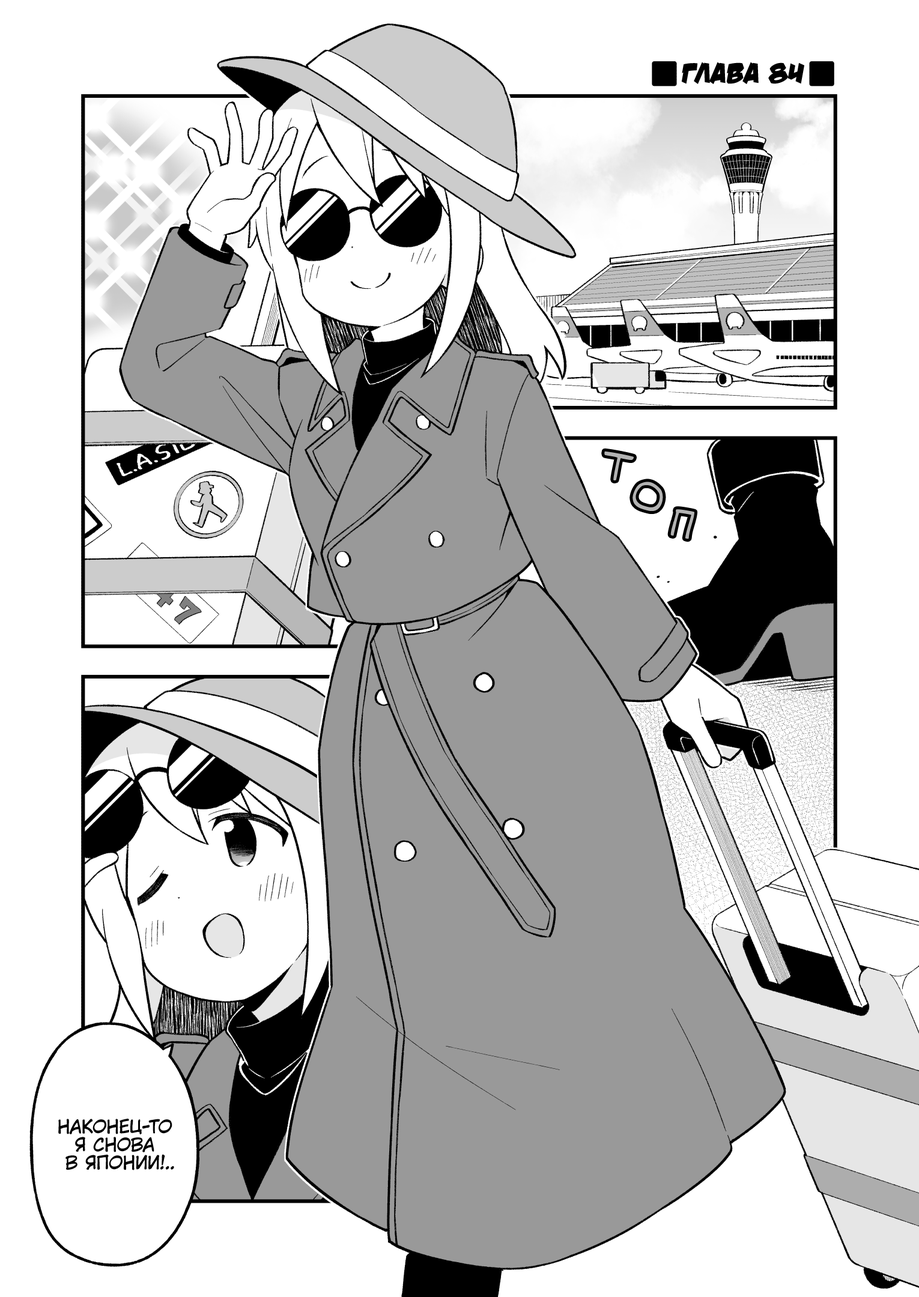
<style>
.page{position:relative;width:919px;height:1297px;background:#ffffff}
.page>*{position:absolute;margin:0}
.t1{font:28.8px "v_DamnNoisyKids";color:#000000;text-transform:uppercase}
.t2{font:18px "KuraiVoice2";color:#000000;text-transform:uppercase}
</style>
<div class="page">
<p class="t1" style="left:681px;top:62px;width:123px;height:22px">Глава 84</p>
<p class="t2" style="left:58px;top:1119px;width:116px;height:52px;text-align:center">Наконец-то<br>я снова<br>в Японии!..</p>
</div>
